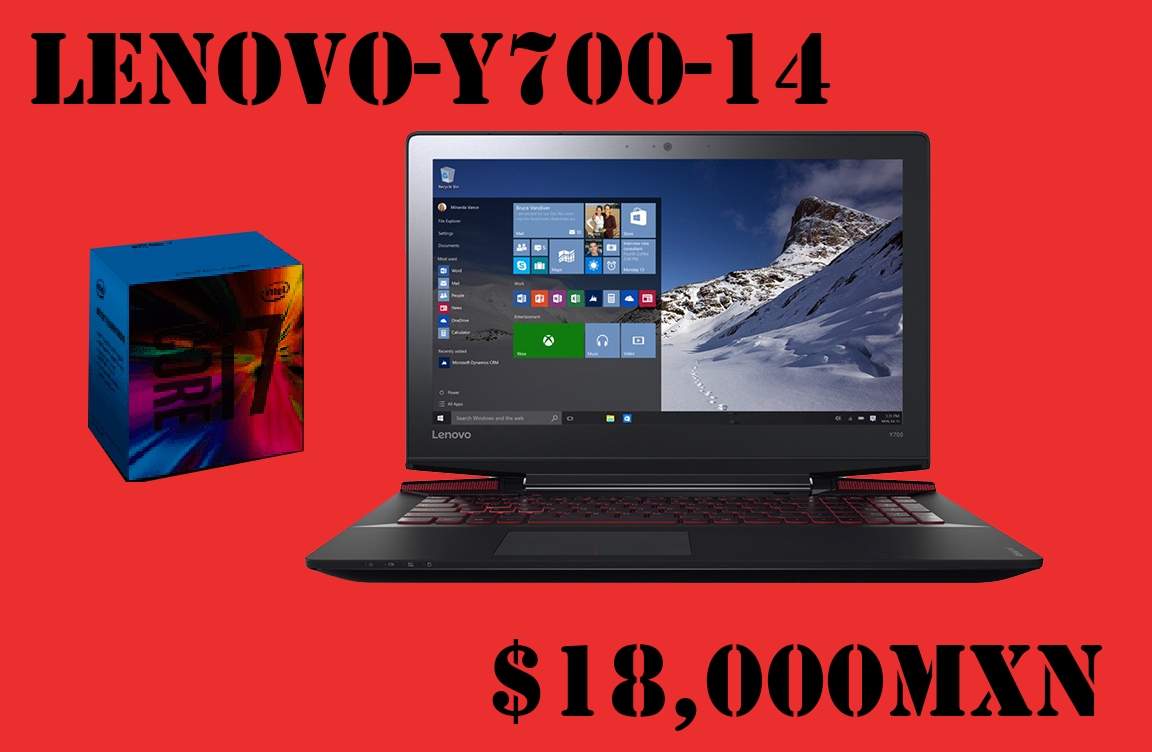
<style>
.page{position:relative;width:1152px;height:752px;background:#eb2f2f}
.page>*{position:absolute;margin:0}
.t1{font:105.8px "Stencil";color:#000000}
</style>
<div class="page">
<p class="t1" style="left:31px;top:31px;width:800px;height:75px">Lenovo-Y700-14</p>
<p class="t1" style="left:492px;top:639px;width:611px;height:92px">$18,000MXN</p>
</div>
